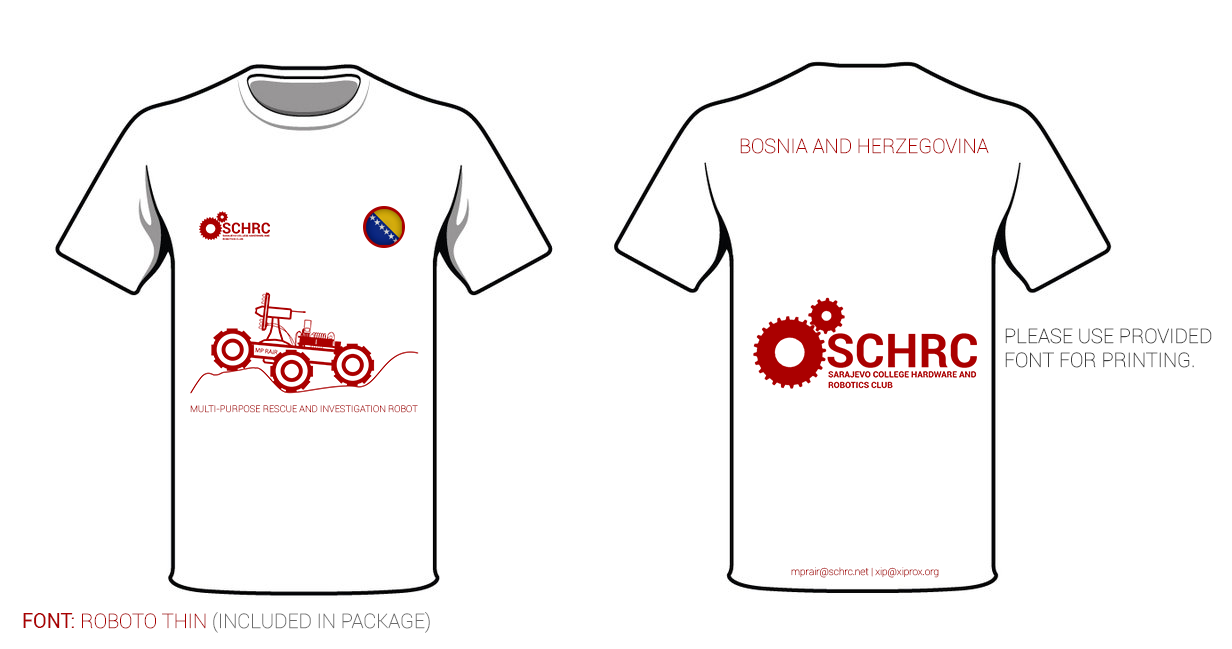
<style>
.page{position:relative;width:1232px;height:649px;background:#ffffff}
.page>*{position:absolute;margin:0}
.t1{font:20px "Roboto-Thin";color:#aa0000}
.t2{font:20px "Roboto-Thin";color:#3d3d3d}
.t3{font:9.3px "Roboto-Thin";color:#aa0000}
.t4{font:10px "Roboto-Thin";color:#aa0000}
.t5{font:20px "Roboto-Thin";color:#6c6c6c}
.t6{font:20px "Roboto-Regular";color:#aa0000}
</style>
<div class="page">
<p class="t1" style="left:740px;top:138px;width:249px;height:16px">BOSNIA AND HERZEGOVINA</p>
<p class="t2" style="left:1005px;top:328px;width:207px;height:40px">PLEASE USE PROVIDED FONT FOR PRINTING.</p>
<p class="t3" style="left:190px;top:405px;width:228px;height:8px">MULTI-PURPOSE RESCUE AND INVESTIGATION ROBOT</p>
<p class="t4" style="left:791px;top:567px;width:148px;height:11px">mprair@schrc.net | xip@xiprox.org</p>
<p class="t5" style="left:23px;top:612px;width:407px;height:21px"><span class="t6">FONT: </span><span class="t1">ROBOTO THIN </span>(INCLUDED IN PACKAGE)</p>
</div>
